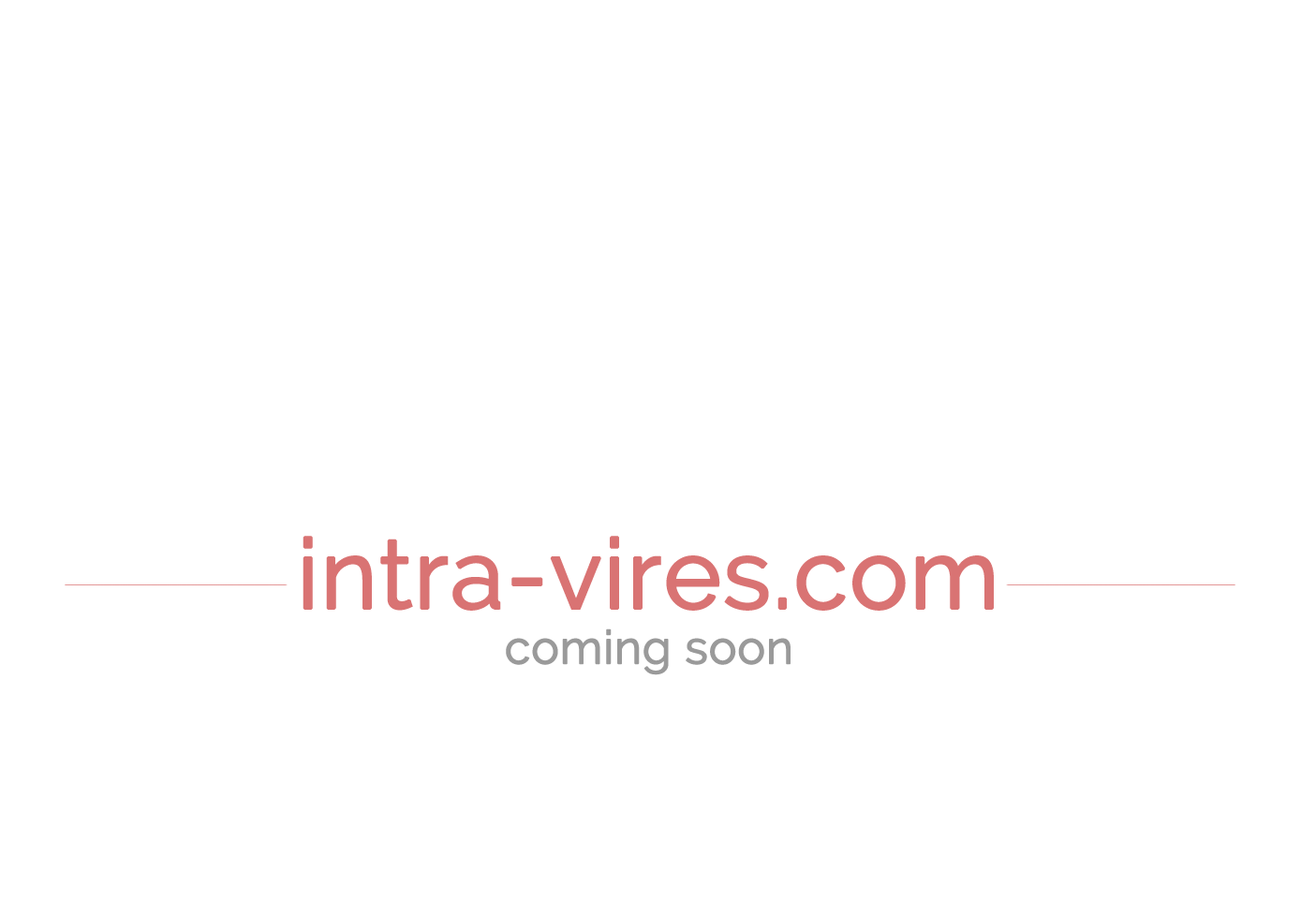
<style>
.page{position:relative;width:1301px;height:916px;background:#ffffff}
.page>*{position:absolute;margin:0}
.t1{font:96.9px "Raleway";color:#d97373;font-weight:bold}
.t2{font:46.1px "Raleway";color:#9a9a9a;font-weight:bold}
</style>
<div class="page">
<p class="t1" style="left:303px;top:536px;width:691px;height:140px;text-align:center">intra-vires.com<br><span class="t2">coming soon</span></p>
</div>
